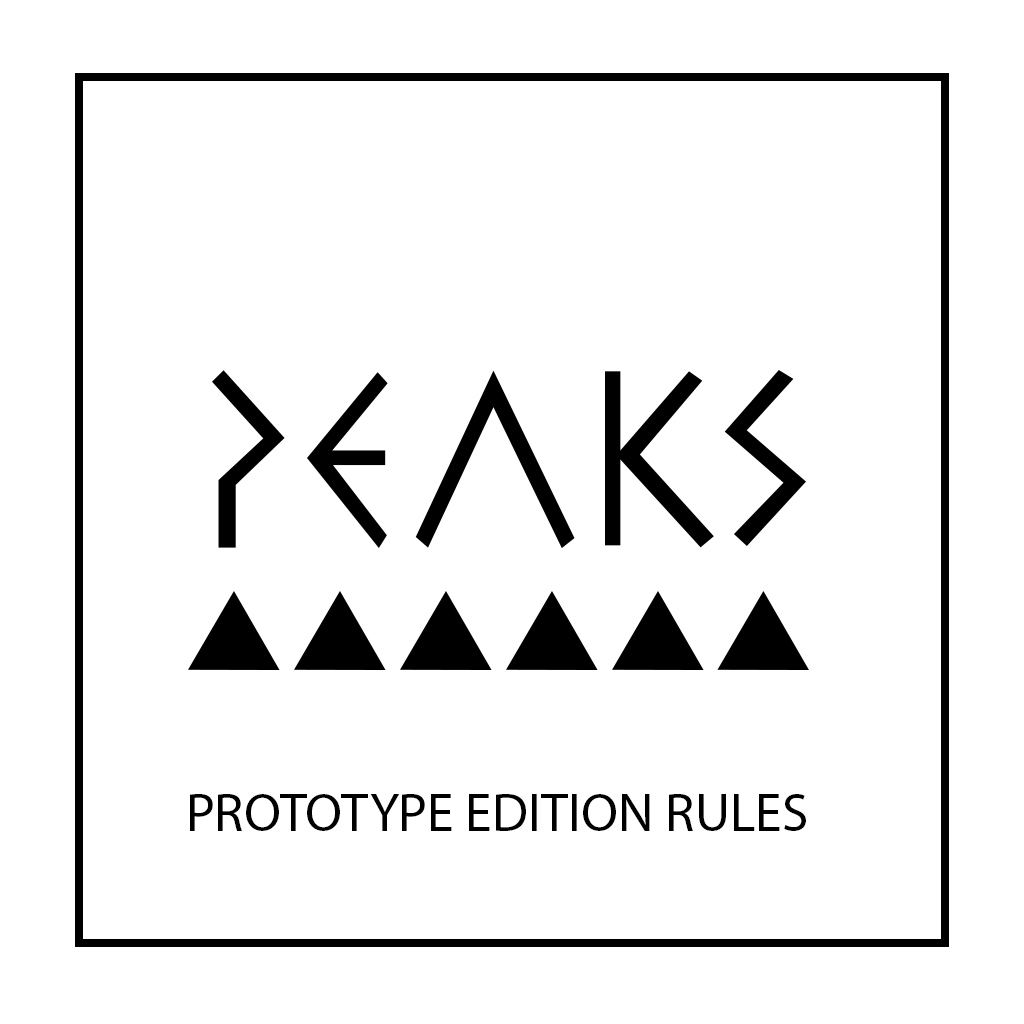
<style>
.page{position:relative;width:1024px;height:1024px;background:#ffffff}
.page>*{position:absolute;margin:0}
.t1{font:54.2px "MyriadPro-Regular";color:#000000}
</style>
<div class="page">
<p class="t1" style="left:190px;top:794px;width:616px;height:37px">PROTOTYPE EDITION RULES</p>
</div>
